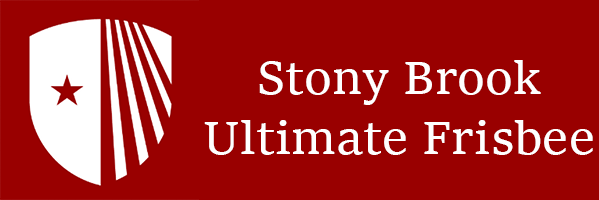
<style>
.page{position:relative;width:599px;height:200px;background:#990000}
.page>*{position:absolute;margin:0}
.t1{font:12px "SitkaText";color:#ffffff}
</style>
<div class="page">
<p class="t1" style="left:204px;top:60px;width:389px;height:95px;text-align:center">Stony Brook<br>Ultimate Frisbee</p>
</div>
